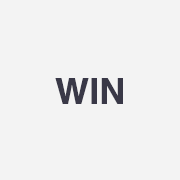
<style>
.page{position:relative;width:180px;height:180px;background:#f3f3f3}
.page>*{position:absolute;margin:0}
.t1{font:36px "HelveticaLTStd-Bold";letter-spacing:0.006em;color:#393847}
</style>
<div class="page">
<p class="t1" style="left:55px;top:78px;width:68px;height:26px">WIN</p>
</div>
